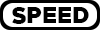
<style>
.page{position:relative;width:100px;height:30px;background:#ffffff}
.page>*{position:absolute;margin:0}
.t1{font:24.2px "PRIMETIME-Regular";letter-spacing:-0.02em;color:#000000}
</style>
<div class="page">
<p class="t1" style="left:12px;top:7px;width:77px;height:17px">speed</p>
</div>
